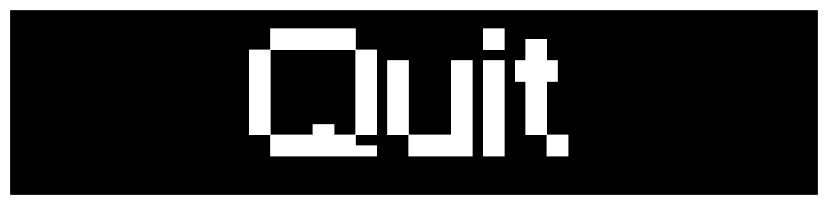
<style>
.page{position:relative;width:828px;height:205px;background:#000000}
.page>*{position:absolute;margin:0}
.t1{font:170.2px "Minecraft";color:#ffffff}
</style>
<div class="page">
<p class="t1" style="left:249px;top:28px;width:320px;height:129px">Quit</p>
</div>
